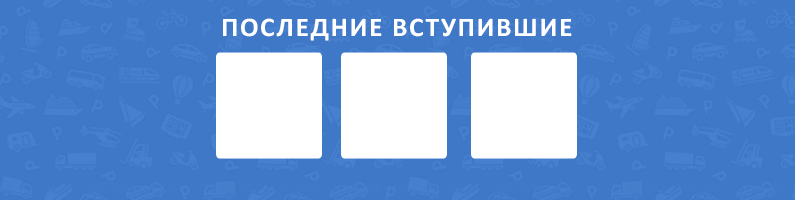
<style>
.page{position:relative;width:795px;height:200px;background:#3e78c6}
.page>*{position:absolute;margin:0}
.t1{font:27px "Calibri-Bold";letter-spacing:0.06em;color:#ffffff}
</style>
<div class="page">
<p class="t1" style="left:223px;top:18px;width:349px;height:23px">ПОСЛЕДНИЕ ВСТУПИВШИЕ</p>
</div>
